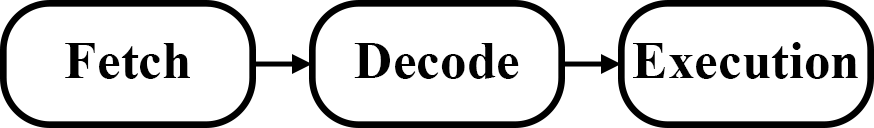
<style>
.page{position:relative;width:874px;height:128px;background:#ffffff}
.page>*{position:absolute;margin:0}
.t1{font:53.3px "TimesNewRomanPS-BoldMT";color:#000000}
</style>
<div class="page">
<p class="t1" style="left:65px;top:43px;width:125px;height:36px">Fetch</p>
<p class="t1" style="left:354px;top:43px;width:165px;height:36px">Decode</p>
<p class="t1" style="left:633px;top:42px;width:225px;height:37px">Execution</p>
</div>
